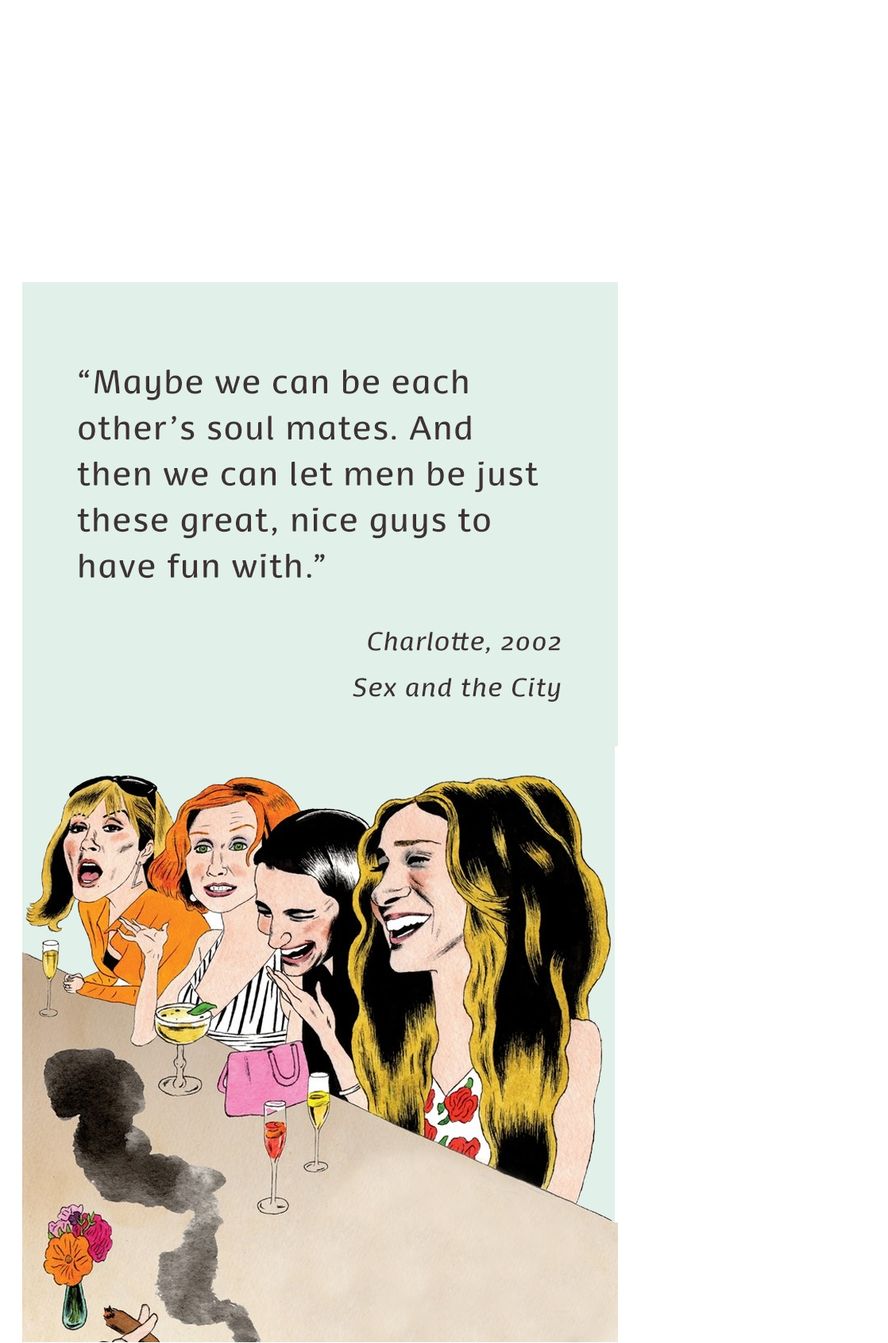
<style>
.page{position:relative;width:888px;height:1343px;background:#ffffff}
.page>*{position:absolute;margin:0}
.t1{font:31.8px/46px "DancerProBook";letter-spacing:0.04em;color:#3d3334}
.t2{font:24.6px/46px "DancerProBook-Italic";letter-spacing:0.04em;color:#3d3334}
</style>
<div class="page">
<p class="t1" style="left:77px;top:369px;width:462px;height:209px">“Maybe we can be each <br>other’s soul mates. And <br>then we can let men be just <br>these great, nice guys to <br>have fun with.”</p>
<p class="t2" style="left:353px;top:632px;width:208px;height:69px;text-align:right">Charlotte, 2002<br>Sex and the City</p>
</div>
